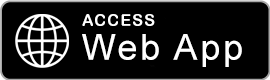
<style>
.page{position:relative;width:270px;height:80px;background:#000000}
.page>*{position:absolute;margin:0}
.t1{font:16px "ArialRoundedMTBold";letter-spacing:0.075em;color:#ffffff}
.t2{font:36px "ArialMT";letter-spacing:0.075em;color:#ffffff}
</style>
<div class="page">
<p class="t1" style="left:82px;top:14px;width:73px;height:12px">ACCESS</p>
<p class="t2" style="left:82px;top:34px;width:160px;height:33px">Web App</p>
</div>
